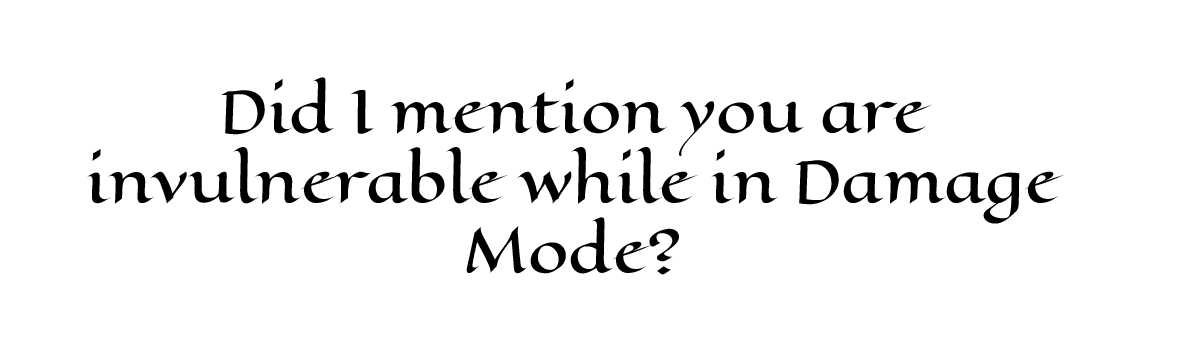
<style>
.page{position:relative;width:1179px;height:338px;background:#ffffff}
.page>*{position:absolute;margin:0}
.t1{font:58.3px "EagleLake-Regular";color:#000000}
</style>
<div class="page">
<p class="t1" style="left:87px;top:77px;width:977px;height:198px;text-align:center">Did I mention you are<br> invulnerable while in Damage <br>Mode?</p>
</div>
